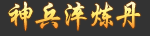
<style>
.page{position:relative;width:150px;height:36px;background:#333333}
.page>*{position:absolute;margin:0}
.t1{font:30px "CTXingKaiSJ";letter-spacing:-0.1em}
</style>
<div class="page">
<p class="t1" style="left:8px;top:1px;width:133px;height:30px">神兵淬炼丹</p>
</div>
